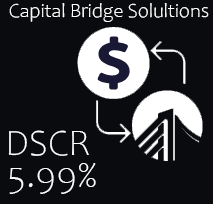
<style>
.page{position:relative;width:213px;height:204px;background:#0a0b0f}
.page>*{position:absolute;margin:0}
.t1{font:20px "Candara-Light";color:#ffffff}
.t2{font:37.3px "Candara-Light";color:#ffffff}
.t3{font:37.3px "Candara-Light";color:#fbfcfc}
</style>
<div class="page">
<p class="t1" style="left:9px;top:3px;width:200px;height:19px">Capital Bridge Solultions</p>
<p class="t2" style="left:8px;top:130px;width:81px;height:26px">DSCR</p>
<p class="t3" style="left:9px;top:163px;width:87px;height:31px">5.99%</p>
</div>
